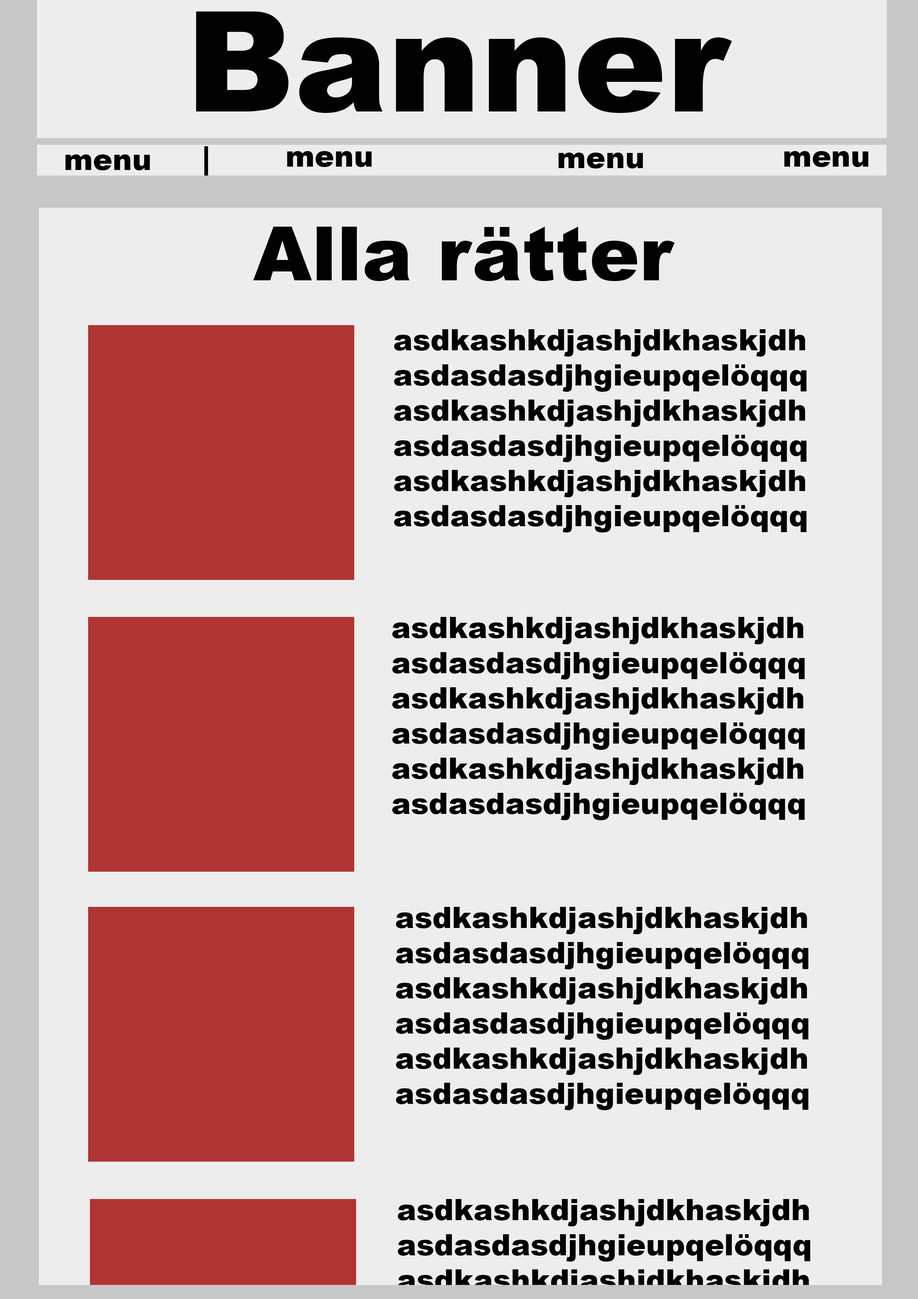
<style>
.page{position:relative;width:918px;height:1299px;background:#ededed}
.page>*{position:absolute;margin:0}
.t1{font:139.5px "Arial-Black";color:#000000}
.t2{font:29.3px "Arial-Black";color:#000000}
.t3{font:75.3px "Arial-Black";color:#000000}
</style>
<div class="page">
<p class="t1" style="left:196px;top:11px;width:536px;height:102px">Banner</p>
<p class="t2" style="left:65px;top:154px;width:85px;height:16px">menu</p>
<p class="t2" style="left:558px;top:153px;width:85px;height:15px">menu</p>
<p class="t2" style="left:784px;top:151px;width:85px;height:16px">menu</p>
<p class="t3" style="left:253px;top:227px;width:422px;height:54px">Alla rätter</p>
<p class="t2" style="left:394px;top:329px;width:413px;height:203px">asdkashkdjashjdkhaskjdh<br>asdasdasdjhgieupqelöqqq<br>asdkashkdjashjdkhaskjdh<br>asdasdasdjhgieupqelöqqq<br>asdkashkdjashjdkhaskjdh<br>asdasdasdjhgieupqelöqqq</p>
<p class="t2" style="left:392px;top:617px;width:413px;height:203px">asdkashkdjashjdkhaskjdh<br>asdasdasdjhgieupqelöqqq<br>asdkashkdjashjdkhaskjdh<br>asdasdasdjhgieupqelöqqq<br>asdkashkdjashjdkhaskjdh<br>asdasdasdjhgieupqelöqqq</p>
<p class="t2" style="left:396px;top:907px;width:413px;height:203px">asdkashkdjashjdkhaskjdh<br>asdasdasdjhgieupqelöqqq<br>asdkashkdjashjdkhaskjdh<br>asdasdasdjhgieupqelöqqq<br>asdkashkdjashjdkhaskjdh<br>asdasdasdjhgieupqelöqqq</p>
</div>
